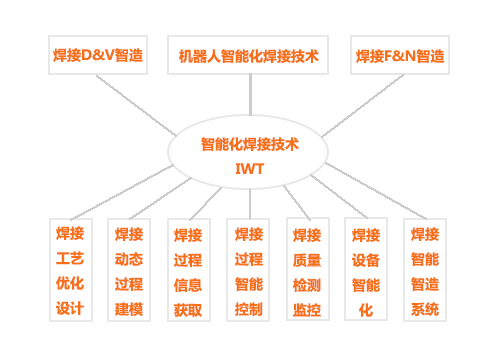
<style>
.page{position:relative;width:500px;height:338px;background:#ffffff}
.page>*{position:absolute;margin:0}
.t1{font:14px "MicrosoftYaHei-Bold";color:#f76f17}
.t2{font:14px/25px "MicrosoftYaHei-Bold";color:#f76f17}
</style>
<div class="page">
<p class="t1" style="left:53px;top:48px;width:90px;height:14px">焊接D&amp;V智造</p>
<p class="t1" style="left:179px;top:49px;width:140px;height:14px">机器人智能化焊接技术</p>
<p class="t1" style="left:356px;top:49px;width:89px;height:14px">焊接F&amp;N智造</p>
<p class="t2" style="left:201px;top:137px;width:98px;height:37px;text-align:center">智能化焊接技术<br>IWT</p>
<p class="t2" style="left:56px;top:226px;width:28px;height:89px;text-align:center">焊接<br>工艺<br>优化<br>设计</p>
<p class="t2" style="left:115px;top:227px;width:28px;height:89px;text-align:center">焊接<br>动态<br>过程<br>建模</p>
<p class="t2" style="left:174px;top:228px;width:28px;height:89px;text-align:center">焊接<br>过程<br>信息<br>获取</p>
<p class="t2" style="left:235px;top:227px;width:28px;height:89px;text-align:center">焊接<br>过程<br>智能<br>控制</p>
<p class="t2" style="left:293px;top:228px;width:28px;height:89px;text-align:center">焊接<br>质量<br>检测<br>监控</p>
<p class="t2" style="left:352px;top:228px;width:28px;height:89px;text-align:center">焊接<br>设备<br>智能<br>化</p>
<p class="t2" style="left:411px;top:227px;width:28px;height:89px;text-align:center">焊接<br>智能<br>智造<br>系统</p>
</div>
